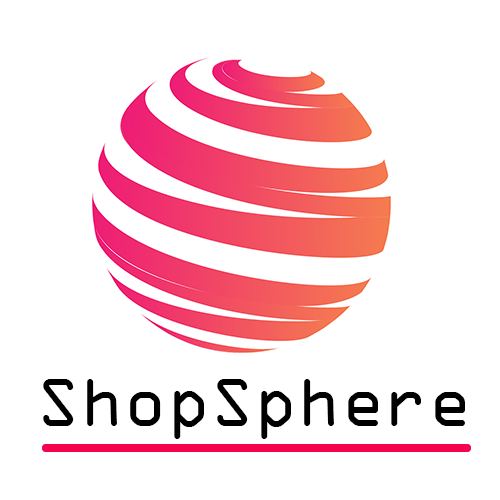
<style>
.page{position:relative;width:500px;height:500px;background:#ffffff}
.page>*{position:absolute;margin:0}
.t1{font:72px "OCRAExtended";color:#000000}
</style>
<div class="page">
<p class="t1" style="left:43px;top:379px;width:422px;height:60px">ShopSphere</p>
</div>
